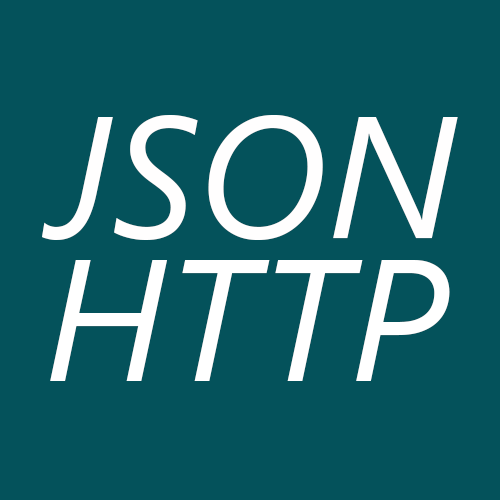
<style>
.page{position:relative;width:500px;height:500px;background:#04525b}
.page>*{position:absolute;margin:0}
.t1{font:173px "SegoeUI-Italic";color:#fffefe}
.t2{font:173px "SegoeUI-Italic";color:#ffffff}
</style>
<div class="page">
<p class="t1" style="left:42px;top:115px;width:416px;height:125px">JSON</p>
<p class="t2" style="left:50px;top:260px;width:400px;height:121px">HTTP</p>
</div>
